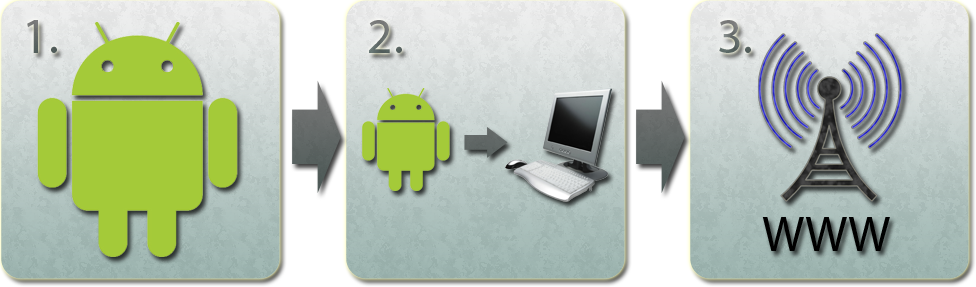
<style>
.page{position:relative;width:976px;height:287px}
.page>*{position:absolute;margin:0}
.t1{font:50px "MyriadPro-Regular";color:#656e6c}
.t2{font:50px "MyriadPro-Regular";color:#000000}
</style>
<div class="page">
<p class="t1" style="left:27px;top:20px;width:724px;height:33px">1.          2.          3.</p>
<p class="t2" style="left:762px;top:217px;width:128px;height:34px">WWW</p>
</div>
